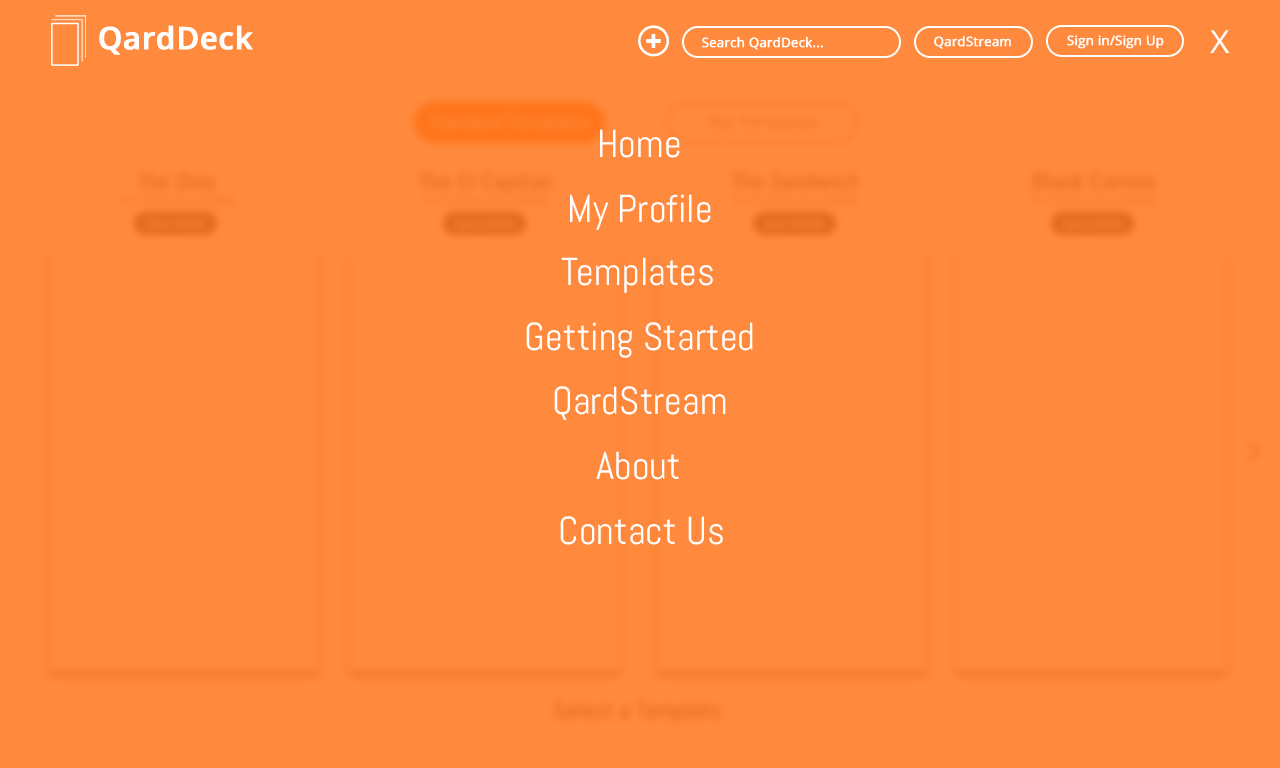
<style>
.page{position:relative;width:1280px;height:768px;background:#ff8a3d}
.page>*{position:absolute;margin:0}
.t1{font:30.9px "OpenSans-Semibold";color:#ffffff;font-weight:bold}
.t2{font:32.1px "OpenSans";color:#ffffff;scale:1.05 1}
.t3{font:13px "OpenSans";color:#ffffff;font-weight:bold}
.t4{font:39.1px "Abel-Regular";color:#ffffff}
</style>
<div class="page">
<p class="t1" style="left:99px;top:25px;width:154px;height:30px">QardDeck</p>
<p class="t2" style="left:1210px;top:30px;width:20px;height:23px">X</p>
<p class="t3" style="left:702px;top:36px;width:122px;height:14px">Search QardDeck...</p>
<p class="t3" style="left:934px;top:35px;width:77px;height:14px">QardStream</p>
<p class="t3" style="left:1067px;top:35px;width:97px;height:14px">Sign in/Sign Up</p>
<p class="t4" style="left:600px;top:129px;width:80px;height:29px">Home</p>
<p class="t4" style="left:570px;top:194px;width:141px;height:36px">My Profile</p>
<p class="t4" style="left:561px;top:257px;width:152px;height:36px">Templates</p>
<p class="t4" style="left:526px;top:322px;width:227px;height:36px">Getting Started</p>
<p class="t4" style="left:554px;top:386px;width:172px;height:34px">QardStream</p>
<p class="t4" style="left:596px;top:451px;width:83px;height:29px">About</p>
<p class="t4" style="left:560px;top:516px;width:163px;height:29px">Contact Us</p>
</div>
